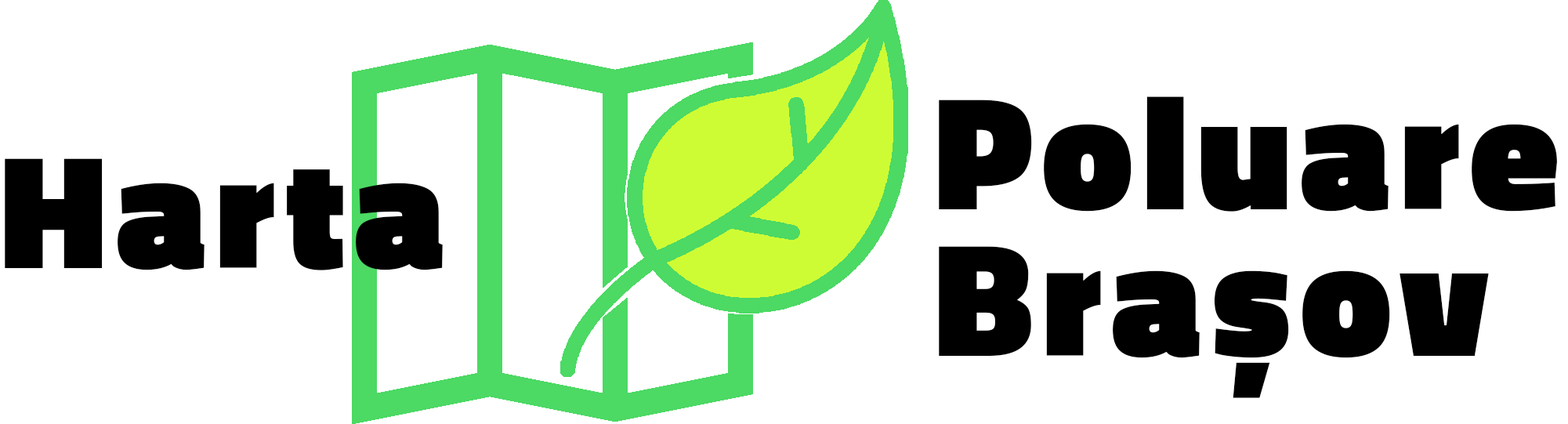
<style>
.page{position:relative;width:1568px;height:424px;background:#ffffff}
.page>*{position:absolute;margin:0}
.t1{font:163.3px "TitilliumWeb-Black";letter-spacing:0.055em;color:#000000}
</style>
<div class="page">
<p class="t1" style="left:939px;top:96px;width:618px;height:116px">Poluare</p>
<p class="t1" style="left:5px;top:158px;width:438px;height:112px">Harta</p>
<p class="t1" style="left:939px;top:246px;width:550px;height:152px">Brașov</p>
</div>
